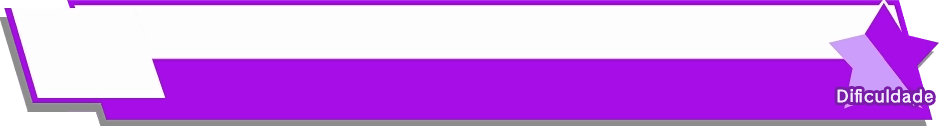
<style>
.page{position:relative;width:939px;height:126px;background:#fefdfe}
.page>*{position:absolute;margin:0}
.t1{font:16px "RodinPro-M";letter-spacing:0.067em;color:#f7e6ff;font-weight:bold}
</style>
<div class="page">
<p class="t1" style="left:837px;top:89px;width:96px;height:14px">Dificuldade</p>
</div>
